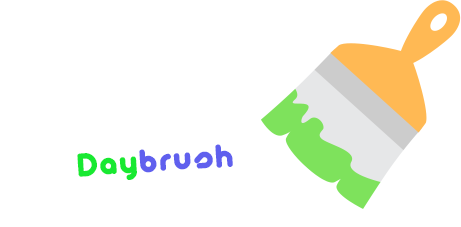
<style>
.page{position:relative;width:461px;height:227px;background:#ffffff}
.page>*{position:absolute;margin:0}
.t1{font:35px "Maagkramp";color:#6060ee}
.t2{font:35px "Maagkramp";color:#18e931}
</style>
<div class="page">
<p class="t1" style="left:77px;top:144px;width:156px;height:36px;rotate:-4deg"><span class="t2">Day</span>brush</p>
</div>
